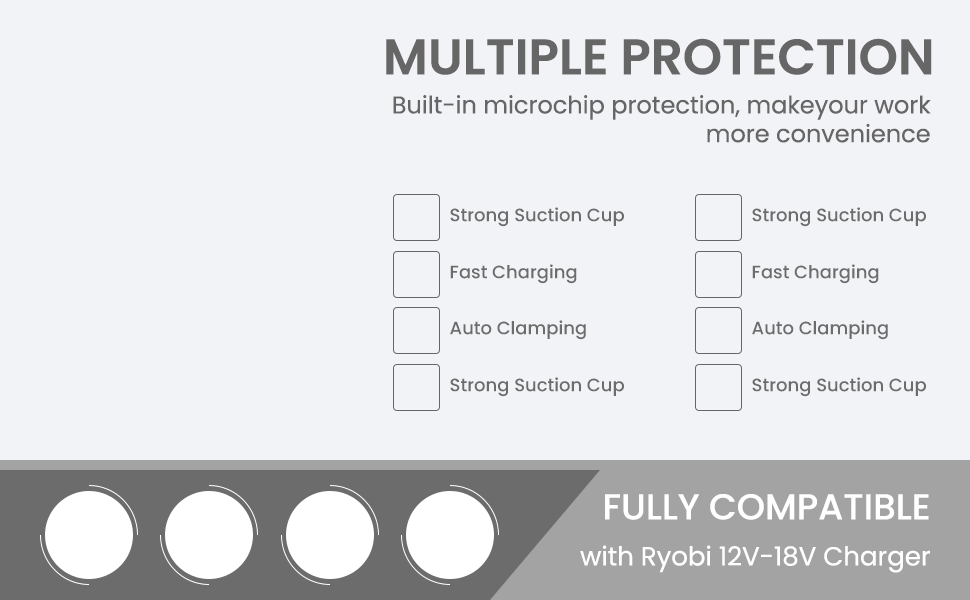
<style>
.page{position:relative;width:970px;height:600px;background:#f2f3f6}
.page>*{position:absolute;margin:0}
.t1{font:50px "Poppins-SemiBold";color:#666666;text-transform:uppercase}
.t2{font:24px "Poppins-Regular";color:#666666}
.t3{font:18px "Poppins-Medium";color:#6c6c6c}
.t4{font:36px "Poppins-Medium";color:#ffffff;text-transform:uppercase}
.t5{font:26px "Poppins-Regular";color:#ffffff}
</style>
<div class="page">
<p class="t1" style="left:386px;top:38px;width:546px;height:37px">Multiple Protection</p>
<p class="t2" style="left:393px;top:95px;width:538px;height:48px;text-align:right">Built-in microchip protection, makeyour work<br>more convenience</p>
<p class="t3" style="left:450px;top:207px;width:174px;height:20px">Strong Suction Cup</p>
<p class="t3" style="left:752px;top:207px;width:174px;height:20px">Strong Suction Cup</p>
<p class="t3" style="left:450px;top:264px;width:127px;height:20px">Fast Charging</p>
<p class="t3" style="left:752px;top:264px;width:127px;height:20px">Fast Charging</p>
<p class="t3" style="left:450px;top:320px;width:136px;height:20px">Auto Clamping</p>
<p class="t3" style="left:752px;top:320px;width:136px;height:20px">Auto Clamping</p>
<p class="t3" style="left:450px;top:377px;width:174px;height:20px">Strong Suction Cup</p>
<p class="t3" style="left:752px;top:377px;width:174px;height:20px">Strong Suction Cup</p>
<p class="t4" style="left:605px;top:494px;width:324px;height:26px">Fully Compatible</p>
<p class="t5" style="left:580px;top:545px;width:350px;height:28px">with Ryobi 12V-18V Charger</p>
</div>
